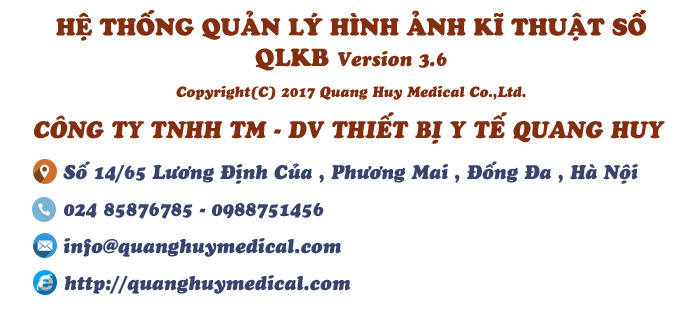
<style>
.page{position:relative;width:700px;height:310px;background:#ffffff}
.page>*{position:absolute;margin:0}
.t1{font:25px "UTM-Cooper-Black";color:#832e10;scale:0.97 1}
.t2{font:20.7px "UTMCooperBlackItalic";color:#832e10;scale:0.97 1}
.t3{font:25.8px "UTM-Cooper-Black";color:#832e10;scale:0.97 1}
.t4{font:15.5px "UTMCooperBlackItalic";color:#832e10;scale:0.97 1}
.t5{font:25px "UTMCooperBlackItalic";color:#832e10;scale:0.97 1}
.t6{font:20.7px "UTMCooperBlackItalic";color:#38446d;scale:0.97 1}
</style>
<div class="page">
<p class="t1" style="left:56px;top:9px;width:590px;height:32px">HỆ THỐNG QUẢN LÝ HÌNH ẢNH KĨ THUẬT SỐ</p>
<p class="t2" style="left:255px;top:48px;width:192px;height:23px"><span class="t3">QLKB </span>Version 3.6</p>
<p class="t4" style="left:176px;top:85px;width:350px;height:15px">Copyright(C) 2017 Quang Huy Medical Co.,Ltd.</p>
<p class="t5" style="left:34px;top:112px;width:631px;height:32px">CÔNG TY TNHH TM - DV THIẾT BỊ Y TẾ QUANG HUY</p>
<p class="t6" style="left:63px;top:161px;width:575px;height:23px">Số 14/65 Lương Định Của , Phương Mai , Đống Đa , Hà Nội</p>
<p class="t6" style="left:64px;top:202px;width:260px;height:17px">024 85876785 - 0988751456</p>
<p class="t6" style="left:63px;top:238px;width:278px;height:19px">info@quanghuymedical.com</p>
<p class="t6" style="left:64px;top:275px;width:287px;height:19px">http://quanghuymedical.com</p>
</div>
